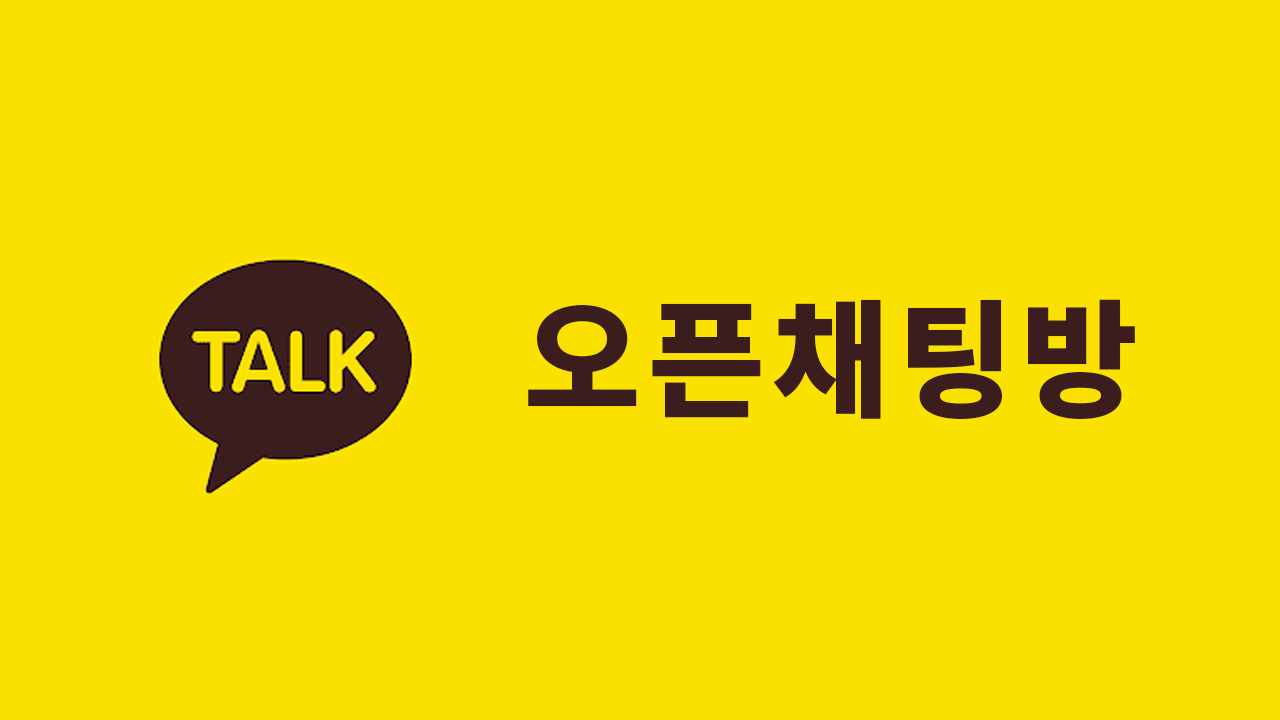
<style>
.page{position:relative;width:1280px;height:720px;background:#fae100}
.page>*{position:absolute;margin:0}
.t1{font:127px "NotoSansKR-Black";letter-spacing:0.06em;color:#3c1d1e}
</style>
<div class="page">
<p class="t1" style="left:528px;top:299px;width:607px;height:120px">오픈채팅방</p>
</div>
